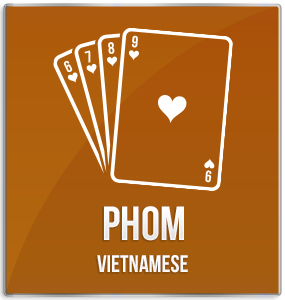
<style>
.page{position:relative;width:285px;height:300px}
.page>*{position:absolute;margin:0}
.t1{font:48px "BebasNeueBold";color:#ffffff;text-transform:uppercase}
.t2{font:24px "BebasNeueBold";color:#ffffff}
</style>
<div class="page">
<p class="t1" style="left:104px;top:206px;width:80px;height:35px">phom</p>
<p class="t2" style="left:97px;top:255px;width:91px;height:18px">vietnamese</p>
</div>
